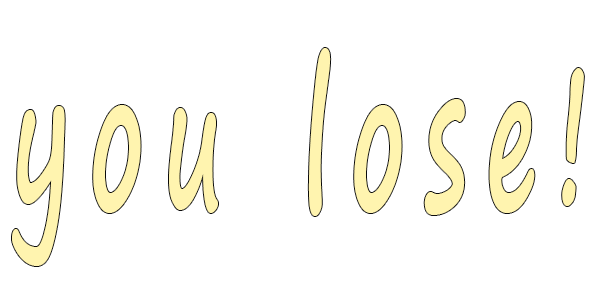
<style>
.page{position:relative;width:600px;height:300px;background:#ffffff}
.page>*{position:absolute;margin:0}
.t1{font:194px "SegoePrint-Bold";letter-spacing:0.2em;color:#fff4af;scale:0.51 1}
</style>
<div class="page">
<p class="t1" style="left:12px;top:48px;width:572px;height:218px">you lose!</p>
</div>
